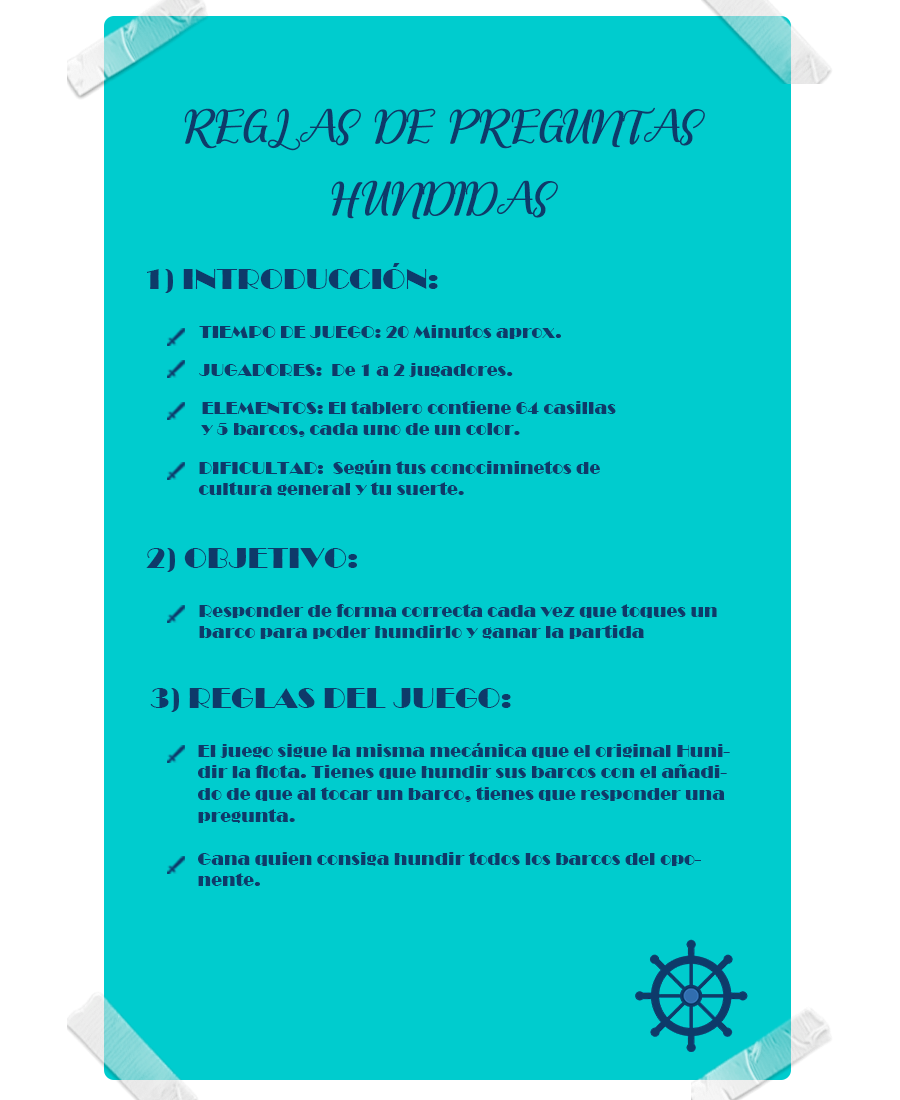
<style>
.page{position:relative;width:900px;height:1100px;background:#00ccce}
.page>*{position:absolute;margin:0}
.t1{font:60px "RememberYou";color:#0e3a6a}
.t2{font:30px "Broadway";color:#0e3a6a}
.t3{font:18px "Broadway";color:#0e3a6a}
</style>
<div class="page">
<p class="t1" style="left:184px;top:107px;width:521px;height:113px;text-align:center">REGLAS DE PREGUNTAS HUNDIDAS</p>
<p class="t2" style="left:147px;top:263px;width:291px;height:30px">1) INTRODUCCIÓN:</p>
<p class="t3" style="left:199px;top:325px;width:362px;height:14px">TIEMPO DE JUEGO: 20 Minutos aprox.</p>
<p class="t3" style="left:199px;top:363px;width:314px;height:14px">JUGADORES:  De 1 a 2 jugadores.</p>
<p class="t3" style="left:201px;top:401px;width:415px;height:36px">ELEMENTOS: El tablero contiene 64 casillas y 5 barcos, cada uno de un color.</p>
<p class="t3" style="left:198px;top:460px;width:402px;height:36px">DIFICULTAD:  Según tus conociminetos de cultura general y tu suerte.</p>
<p class="t2" style="left:146px;top:548px;width:211px;height:24px">2) OBJETIVO:</p>
<p class="t3" style="left:199px;top:604px;width:518px;height:35px">Responder de forma correcta cada vez que toques un barco para poder hundirlo y ganar la partida</p>
<p class="t2" style="left:150px;top:688px;width:361px;height:24px">3) REGLAS DEL JUEGO:</p>
<p class="t3" style="left:198px;top:743px;width:532px;height:143px">El juego sigue la misma mecánica que el original Hunidir la flota. Tienes que hundir sus barcos con el añadido de que al tocar un barco, tienes que responder una pregunta.<br><br>Gana quien consiga hundir todos los barcos del oponente.</p>
</div>
